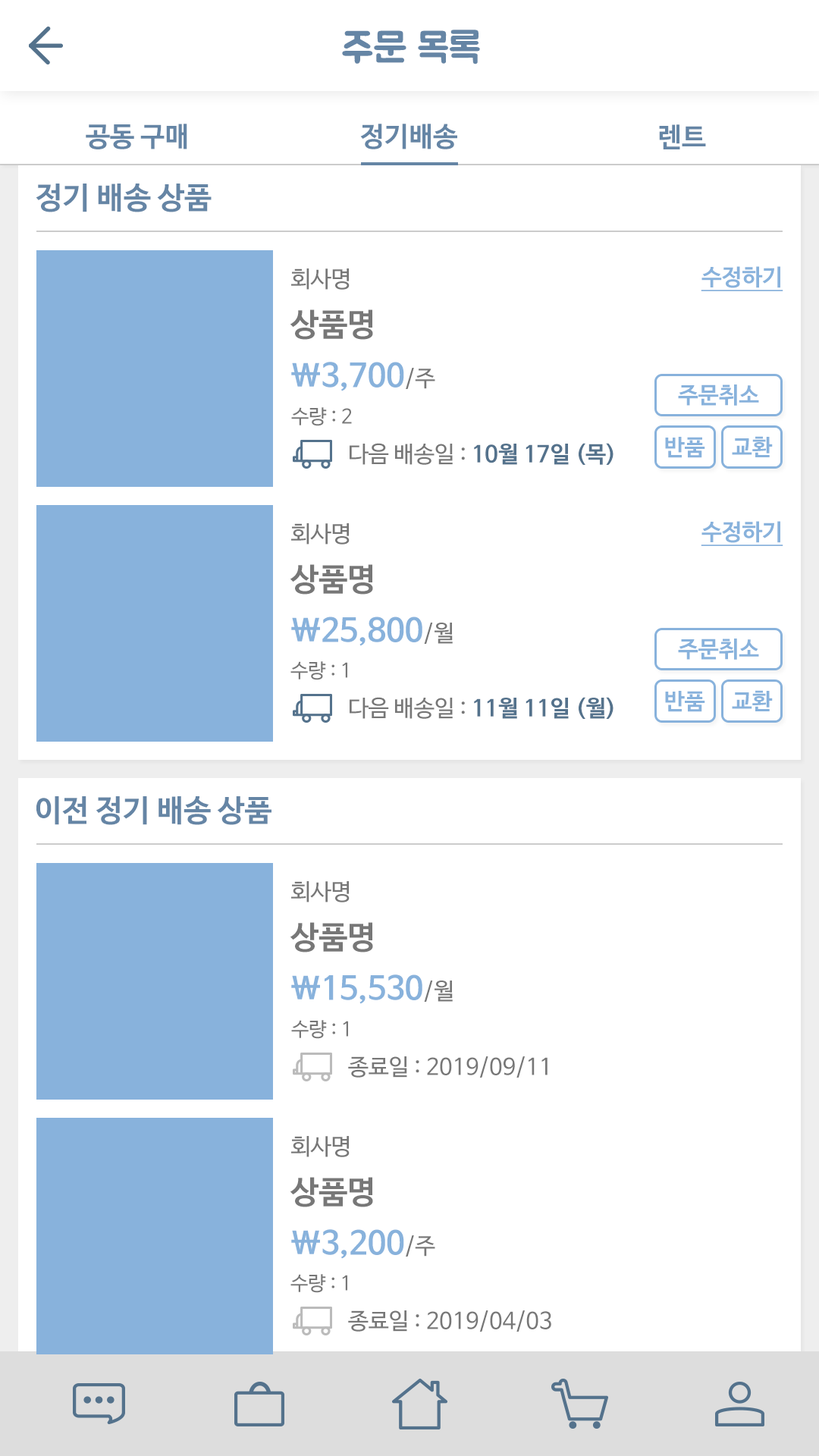
<style>
.page{position:relative;width:819px;height:1456px;background:#ffffff}
.page>*{position:absolute;margin:0}
.t1{font:40.9px "BMJUA";color:#6585a5}
.t2{font:27.3px "NanumBarunGothicBold";color:#6585a5}
.t3{font:30.3px "NanumBarunGothicBold";color:#6585a5}
.t4{font:22.7px "NanumBarunGothic";color:#777777}
.t5{font:22.7px "NanumBarunGothicBold";color:#88b2dc;text-decoration:underline}
.t6{font:31.8px "NanumBarunGothicBold";color:#777777}
.t7{font:31.8px "NanumBarunGothicBold";color:#88b2dc}
.t8{font:22.7px "NanumBarunGothicBold";color:#88b2dc}
.t9{font:19.7px "NanumBarunGothic";color:#777777}
.t10{font:22.7px "NanumBarunGothicBold";color:#54728c}
</style>
<div class="page">
<p class="t1" style="left:342px;top:30px;width:138px;height:34px">주문 목록</p>
<p class="t2" style="left:86px;top:124px;width:101px;height:25px">공동 구매</p>
<p class="t2" style="left:360px;top:124px;width:97px;height:25px">정기배송</p>
<p class="t2" style="left:659px;top:124px;width:47px;height:25px">렌트</p>
<p class="t3" style="left:36px;top:184px;width:176px;height:28px">정기 배송 상품</p>
<p class="t4" style="left:291px;top:268px;width:59px;height:22px">회사명</p>
<p class="t5" style="left:701px;top:266px;width:82px;height:25px">수정하기</p>
<p class="t6" style="left:290px;top:309px;width:83px;height:31px">상품명</p>
<p class="t7" style="left:291px;top:362px;width:144px;height:29px">\3,700<span class="t4">/주</span></p>
<p class="t8" style="left:678px;top:384px;width:81px;height:22px">주문취소</p>
<p class="t9" style="left:291px;top:407px;width:61px;height:19px">수량 : 2</p>
<p class="t8" style="left:665px;top:437px;width:40px;height:21px">반품</p>
<p class="t8" style="left:732px;top:436px;width:41px;height:21px">교환</p>
<p class="t10" style="left:350px;top:443px;width:263px;height:22px"><span class="t4">다음 배송일 : </span>10월 17일 (목)</p>
<p class="t5" style="left:701px;top:521px;width:82px;height:25px">수정하기</p>
<p class="t4" style="left:291px;top:523px;width:59px;height:21px">회사명</p>
<p class="t6" style="left:290px;top:564px;width:83px;height:31px">상품명</p>
<p class="t7" style="left:291px;top:617px;width:162px;height:29px">\25,800<span class="t4">/월</span></p>
<p class="t8" style="left:678px;top:639px;width:81px;height:21px">주문취소</p>
<p class="t9" style="left:290px;top:661px;width:57px;height:19px">수량 : 1</p>
<p class="t10" style="left:350px;top:697px;width:263px;height:22px"><span class="t4">다음 배송일 : </span>11월 11일 (월)</p>
<p class="t8" style="left:665px;top:691px;width:40px;height:21px">반품</p>
<p class="t8" style="left:732px;top:690px;width:41px;height:21px">교환</p>
<p class="t3" style="left:36px;top:796px;width:235px;height:29px">이전 정기 배송 상품</p>
<p class="t4" style="left:291px;top:881px;width:59px;height:21px">회사명</p>
<p class="t6" style="left:290px;top:922px;width:83px;height:30px">상품명</p>
<p class="t7" style="left:291px;top:974px;width:162px;height:30px">\15,530<span class="t4">/월</span></p>
<p class="t9" style="left:291px;top:1020px;width:57px;height:19px">수량 : 1</p>
<p class="t4" style="left:348px;top:1056px;width:200px;height:22px">종료일 : 2019/09/11</p>
<p class="t4" style="left:291px;top:1136px;width:59px;height:21px">회사명</p>
<p class="t6" style="left:290px;top:1177px;width:83px;height:30px">상품명</p>
<p class="t7" style="left:291px;top:1229px;width:144px;height:30px">\3,200<span class="t4">/주</span></p>
<p class="t9" style="left:290px;top:1274px;width:57px;height:19px">수량 : 1</p>
<p class="t4" style="left:348px;top:1310px;width:203px;height:22px">종료일 : 2019/04/03</p>
</div>
